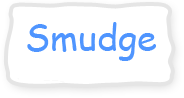
<style>
.page{position:relative;width:184px;height:98px;background:#ffffff}
.page>*{position:absolute;margin:0}
.t1{font:36px "ComicSansMS";color:#4f95ff}
</style>
<div class="page">
<p class="t1" style="left:27px;top:22px;width:129px;height:39px">Smudge</p>
</div>
